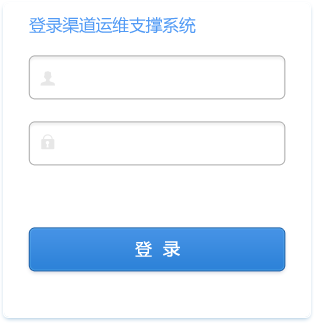
<style>
.page{position:relative;width:314px;height:325px;background:#ffffff}
.page>*{position:absolute;margin:0}
.t1{font:16.7px "MicrosoftYaHei";color:#519af5}
</style>
<div class="page">
<p class="t1" style="left:29px;top:17px;width:167px;height:17px">登录渠道运维支撑系统</p>
</div>
